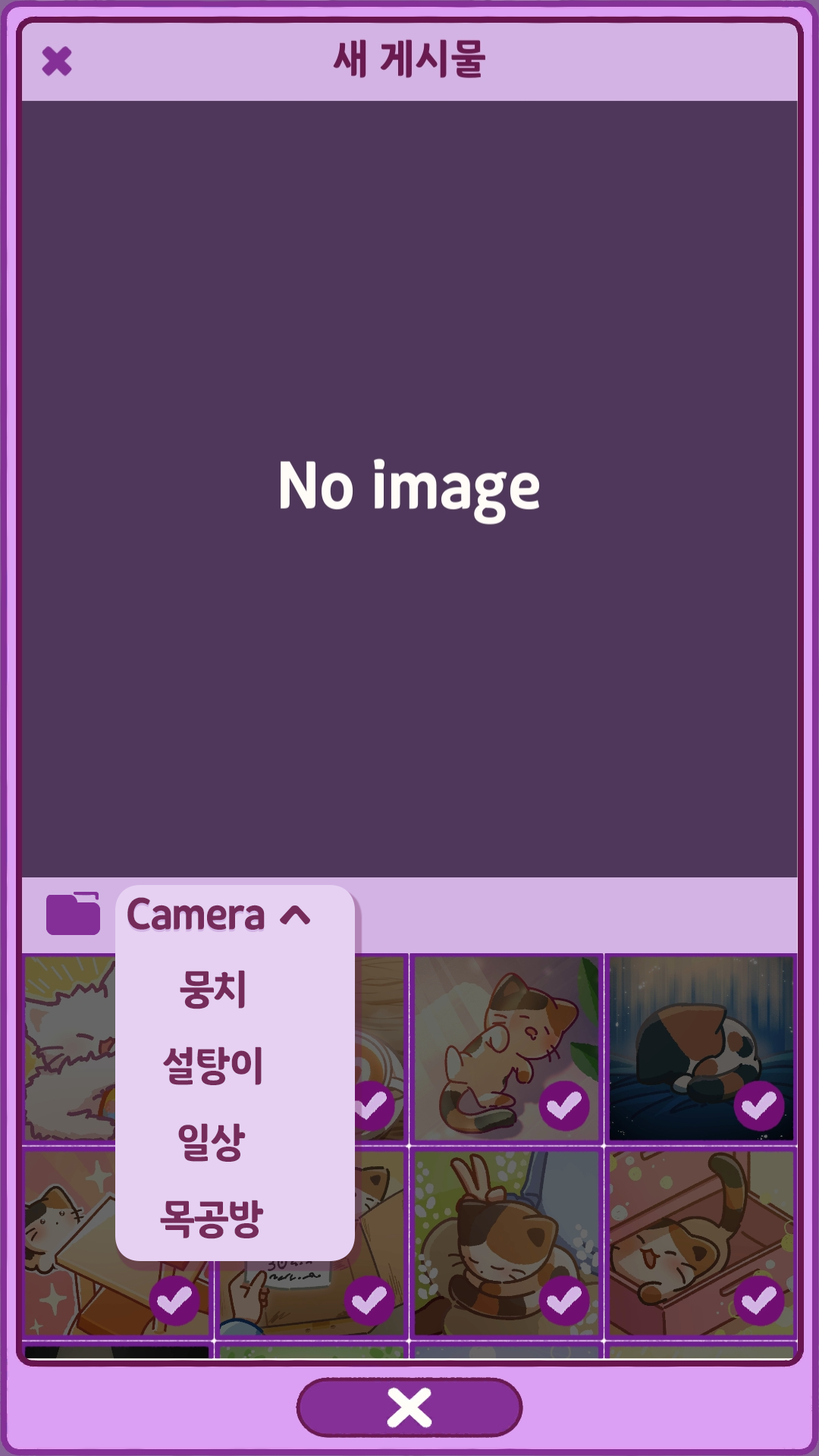
<style>
.page{position:relative;width:819px;height:1456px;background:#4f375b}
.page>*{position:absolute;margin:0}
.t1{font:45.5px "SDSamliphopangcheBasic";letter-spacing:-0.025em;color:#752c5b}
.t2{font:45.5px "SDSamliphopangcheTTFBasic";letter-spacing:-0.025em;color:#752c5b}
</style>
<div class="page">
<p class="t1" style="left:127px;top:899px;width:138px;height:33px">Camera</p>
<p class="t2" style="left:127px;top:897px;width:138px;height:33px">Camera</p>
<p class="t2" style="left:180px;top:970px;width:65px;height:39px">뭉치</p>
<p class="t2" style="left:163px;top:1046px;width:99px;height:39px">설탕이</p>
<p class="t2" style="left:178px;top:1123px;width:68px;height:39px">일상</p>
<p class="t2" style="left:160px;top:1200px;width:104px;height:39px">목공방</p>
</div>
